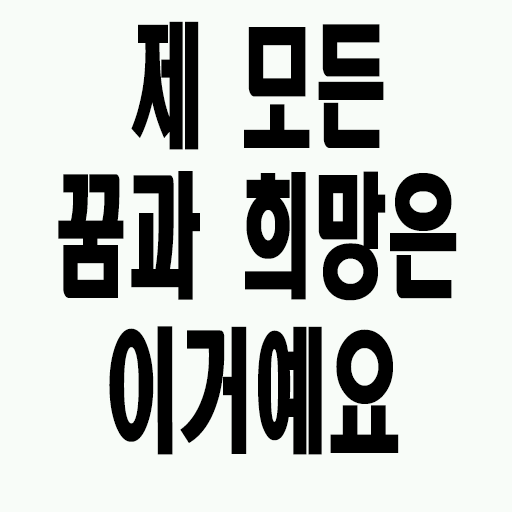
<style>
.page{position:relative;width:512px;height:512px;background:#f8fcf8}
.page>*{position:absolute;margin:0}
.t1{font:133.2px "HeadlineR-HM";color:#000000;scale:0.56 1}
</style>
<div class="page">
<p class="t1" style="left:131px;top:21px;width:253px;height:129px">제 모든</p>
<p class="t1" style="left:58px;top:171px;width:399px;height:130px">꿈과 희망은</p>
<p class="t1" style="left:109px;top:326px;width:290px;height:129px">이거예요</p>
</div>
